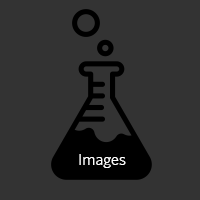
<style>
.page{position:relative;width:200px;height:200px;background:#333333}
.page>*{position:absolute;margin:0}
.t1{font:16px "Whitney-Book";color:#ffffff}
</style>
<div class="page">
<p class="t1" style="left:79px;top:154px;width:47px;height:14px">Images</p>
</div>
